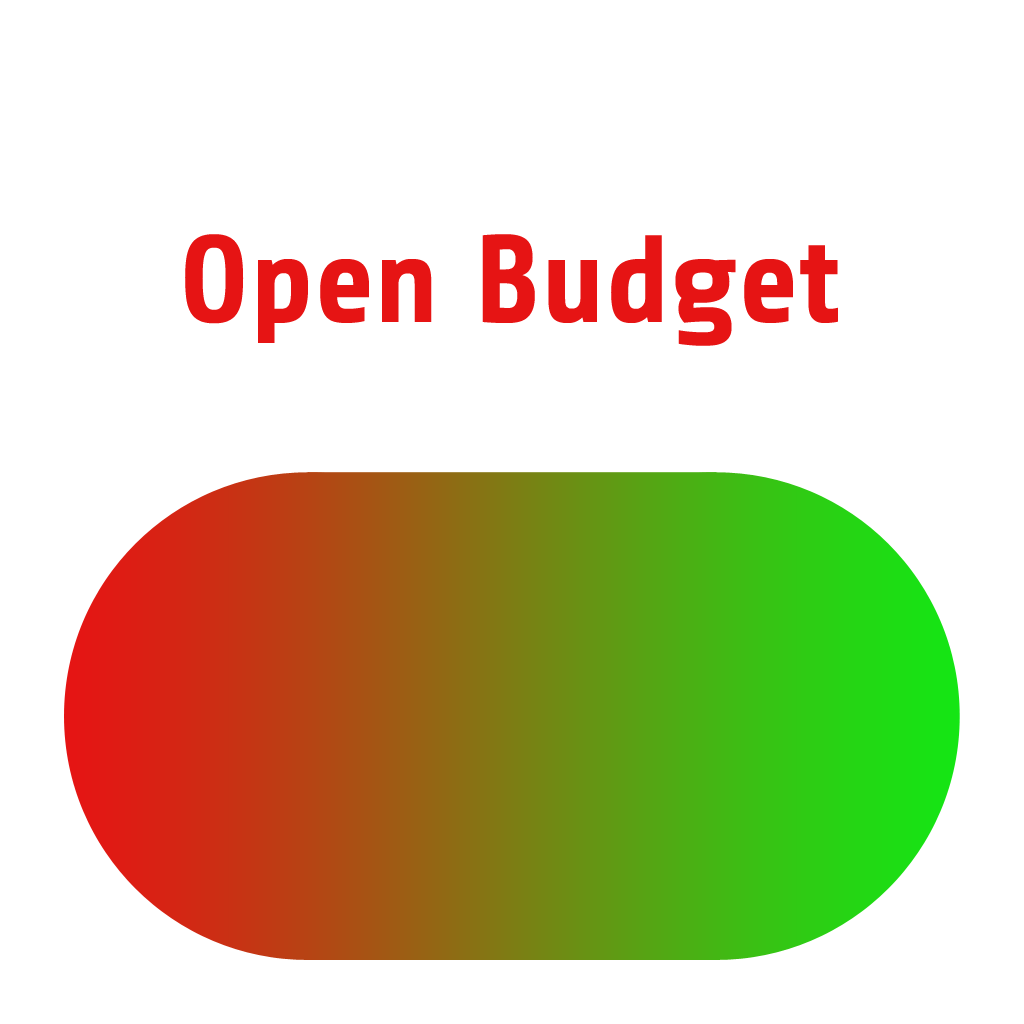
<style>
.page{position:relative;width:1024px;height:1024px;background:#ffffff}
.page>*{position:absolute;margin:0}
.t1{font:123.7px "Share-Bold";color:#e61414}
</style>
<div class="page">
<p class="t1" style="left:185px;top:234px;width:653px;height:112px">Open Budget</p>
</div>
